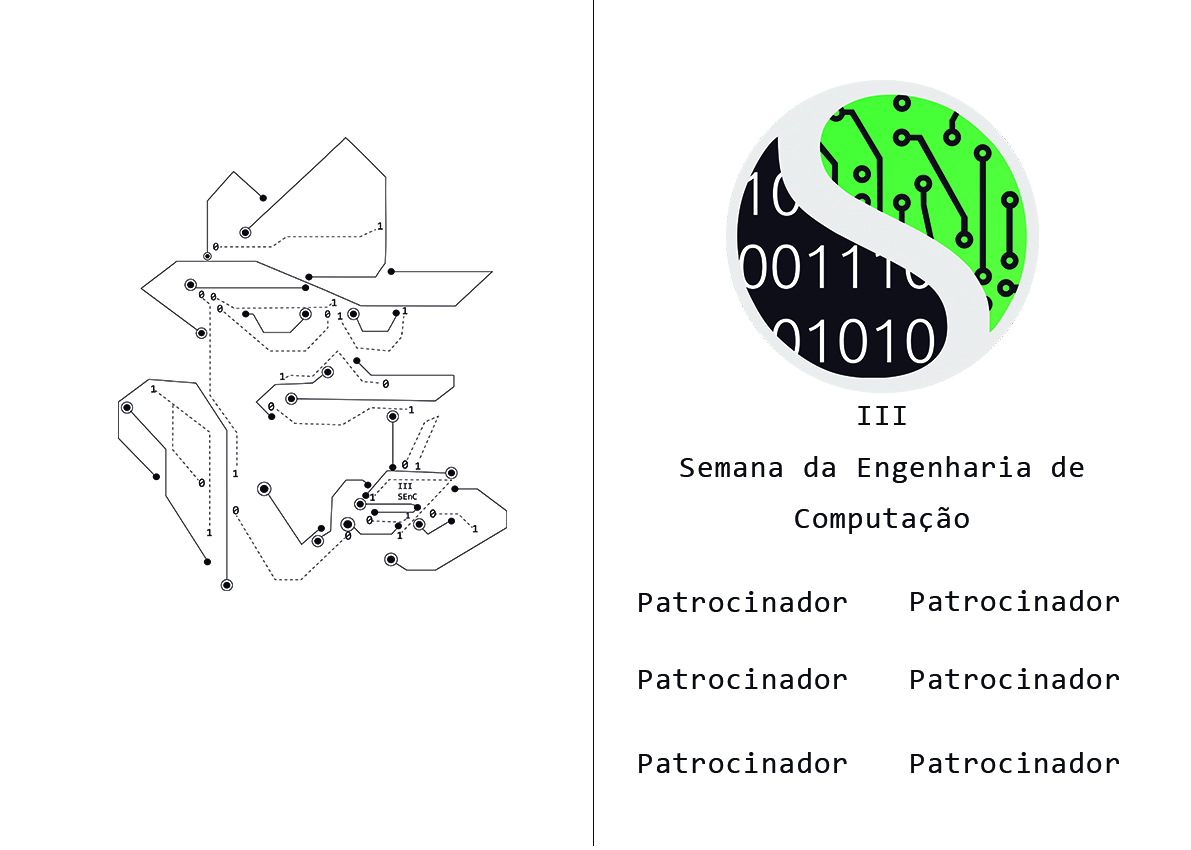
<style>
.page{position:relative;width:1191px;height:850px;background:#ffffff}
.page>*{position:absolute;margin:0}
.t1{font:30px/51.8px "Consolas";letter-spacing:0.04em;color:#0a0c11}
.t2{font:30px "Consolas";letter-spacing:0.04em;color:#0a0c11}
</style>
<div class="page">
<p class="t1" style="left:680px;top:406px;width:404px;height:128px;text-align:center">III<br>Semana da Engenharia de Computação</p>
<p class="t2" style="left:639px;top:591px;width:208px;height:21px">Patrocinador</p>
<p class="t2" style="left:911px;top:590px;width:208px;height:21px">Patrocinador</p>
<p class="t2" style="left:639px;top:668px;width:208px;height:21px">Patrocinador</p>
<p class="t2" style="left:911px;top:668px;width:208px;height:21px">Patrocinador</p>
<p class="t2" style="left:639px;top:752px;width:208px;height:21px">Patrocinador</p>
</div>
